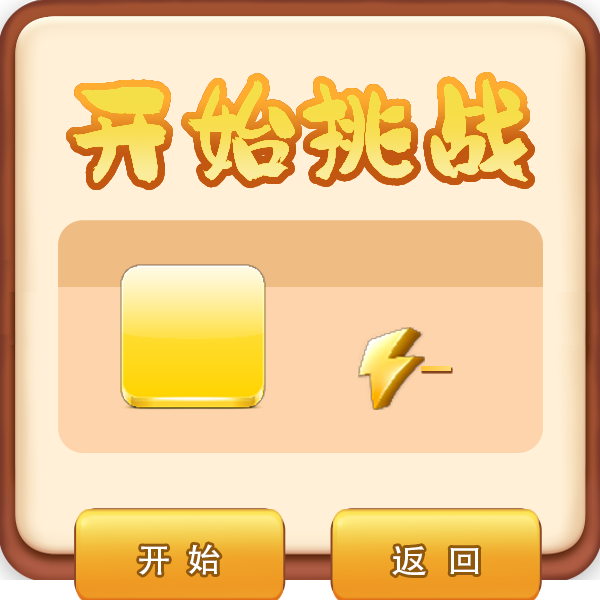
<style>
.page{position:relative;width:600px;height:600px;background:#fff0d7}
.page>*{position:absolute;margin:0}
.t1{font:33.3px "AdobeHeitiStd-Regular";letter-spacing:0.5em;color:#ffffff}
.t2{font:33.3px "AdobeHeitiStd-Regular";letter-spacing:0.5em;color:#ffffff;scale:1.1 1}
</style>
<div class="page">
<p class="t1" style="left:139px;top:544px;width:81px;height:31px">开始</p>
<p class="t2" style="left:392px;top:546px;width:87px;height:30px">返回</p>
</div>
